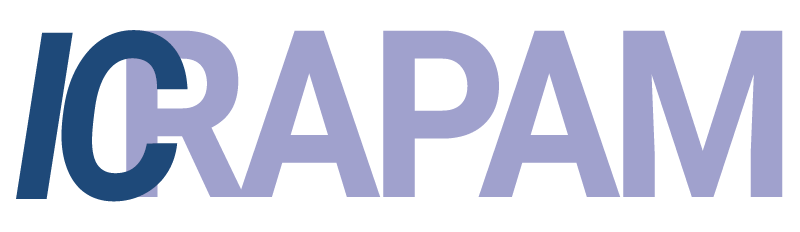
<style>
.page{position:relative;width:800px;height:232px;background:#ffffff}
.page>*{position:absolute;margin:0}
.t1{font:234px "Roboto-BoldItalic";letter-spacing:-0.1em;color:#1e4979;scale:0.91 1}
.t2{font:234px "Roboto-Bold";letter-spacing:-0.05em;color:#a0a1cd;scale:0.91 1}
</style>
<div class="page">
<p class="t1" style="left:16px;top:30px;width:172px;height:172px">IC</p>
<p class="t2" style="left:126px;top:30px;width:657px;height:167px">RAPAM</p>
</div>
